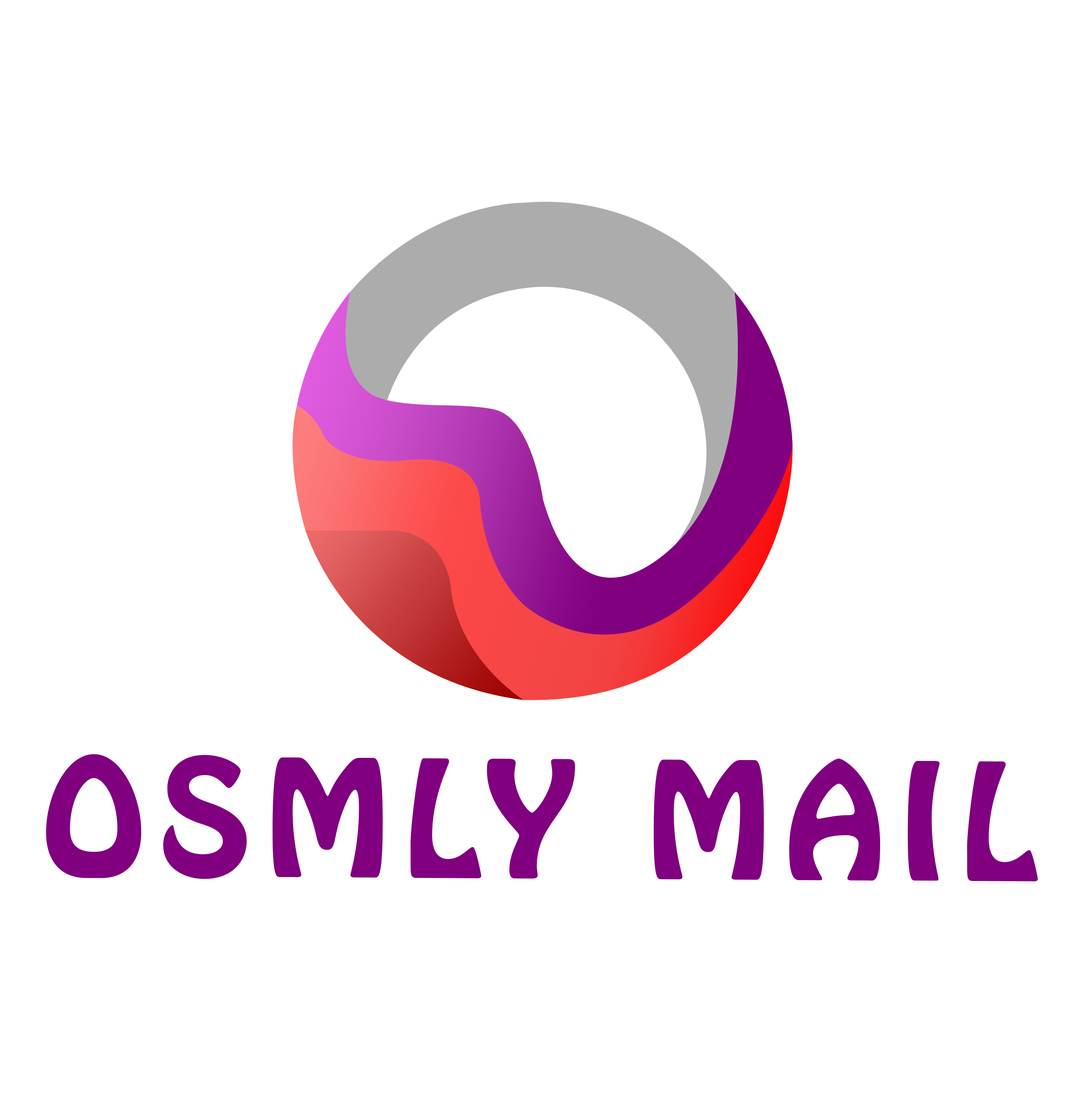
<style>
.page{position:relative;width:1085px;height:1099px;background:#ffffff}
.page>*{position:absolute;margin:0}
.t1{font:142.9px "HoboStd";letter-spacing:0.075em;color:#800080;font-weight:bold}
</style>
<div class="page">
<p class="t1" style="left:46px;top:754px;width:992px;height:127px">OSMLY MAIL</p>
</div>
